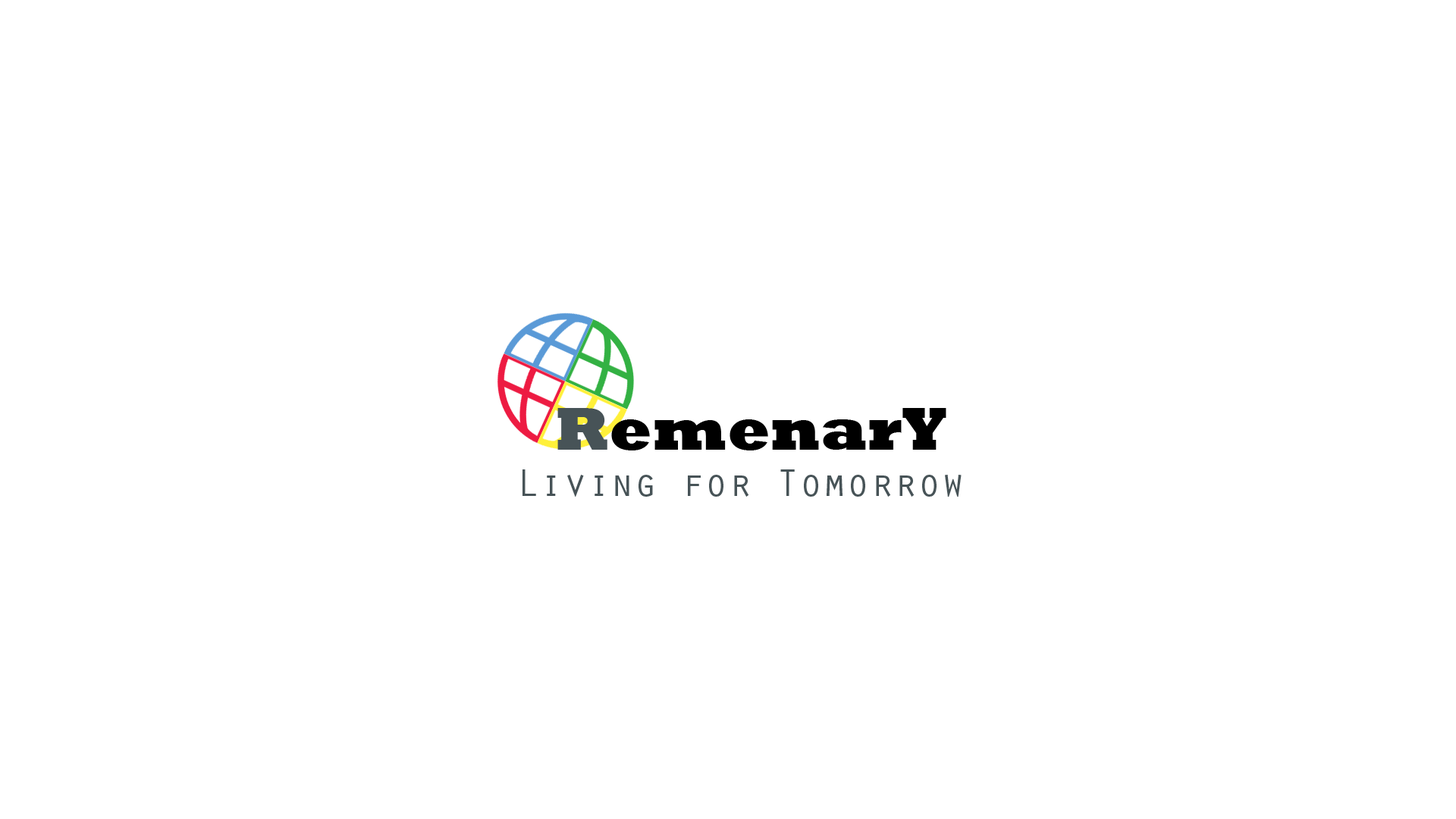
<style>
.page{position:relative;width:1456px;height:819px;background:#ffffff}
.page>*{position:absolute;margin:0}
.t1{font:62.5px "Rockwell-ExtraBold";color:#000000}
.t2{font:62.5px "Rockwell-ExtraBold";color:#475357}
.t3{font:39.4px "OratorStd";color:#475357}
</style>
<div class="page">
<p class="t1" style="left:557px;top:408px;width:389px;height:42px"><span class="t2">R</span>emenarY</p>
<p class="t3" style="left:522px;top:469px;width:440px;height:28px">Living for Tomorrow</p>
</div>
